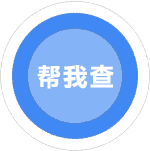
<style>
.page{position:relative;width:150px;height:151px;background:#ffffff}
.page>*{position:absolute;margin:0}
.t1{font:24px "MicrosoftYaHei-Bold";letter-spacing:0.1em;color:#ffffff}
</style>
<div class="page">
<p class="t1" style="left:37px;top:64px;width:77px;height:25px">帮我查</p>
</div>
